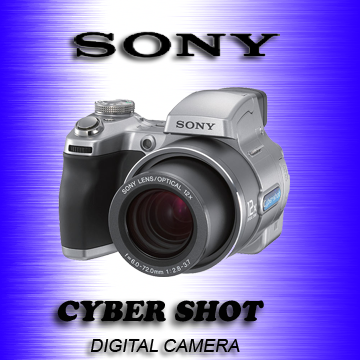
<style>
.page{position:relative;width:360px;height:360px}
.page>*{position:absolute;margin:0}
.t1{font:30px "CooperBlack";color:#020202;font-style:italic}
.t2{font:18px "ArialMT";color:#020202;font-style:italic}
</style>
<div class="page">
<p class="t1" style="left:57px;top:300px;width:207px;height:22px">CYBER SHOT</p>
<p class="t2" style="left:90px;top:339px;width:150px;height:13px">DIGITAL CAMERA</p>
</div>
